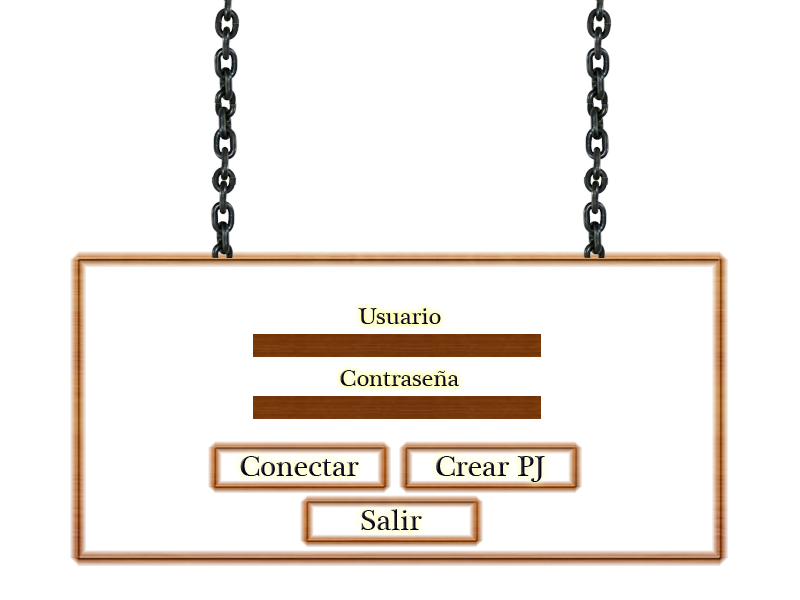
<style>
.page{position:relative;width:800px;height:600px;background:#ffffff}
.page>*{position:absolute;margin:0}
.t1{font:24px "PlantagenetCherokee";color:#0a0523}
.t2{font:30px "PlantagenetCherokee";color:#0a0523}
</style>
<div class="page">
<p class="t1" style="left:358px;top:308px;width:83px;height:16px">Usuario</p>
<p class="t1" style="left:340px;top:370px;width:120px;height:16px">Contraseña</p>
<p class="t2" style="left:240px;top:456px;width:119px;height:20px">Conectar</p>
<p class="t2" style="left:436px;top:456px;width:109px;height:26px">Crear PJ</p>
<p class="t2" style="left:361px;top:509px;width:61px;height:22px">Salir</p>
</div>
